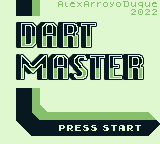
<style>
.page{position:relative;width:160px;height:144px;background:#e0f8cf}
.page>*{position:absolute;margin:0}
.t1{font:7.1px/8px "Dogica_Pixel";color:#86c06c;scale:1.12 1}
.t2{font:8px "Early-GameBoy";color:#e0f8cf}
</style>
<div class="page">
<p class="t1" style="left:58px;top:1px;width:99px;height:14px;text-align:right">AlexArroyoDuque<br>2022</p>
<p class="t2" style="left:59px;top:125px;width:82px;height:6px">press start</p>
</div>
